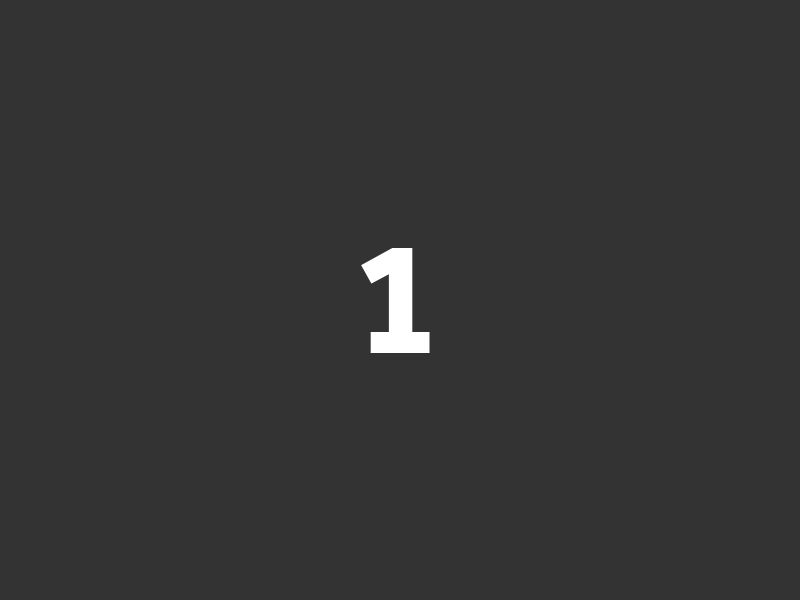
<style>
.page{position:relative;width:800px;height:600px;background:#333333}
.page>*{position:absolute;margin:0}
.t1{font:166.7px "Effra-Bold";color:#ffffff}
</style>
<div class="page">
<p class="t1" style="left:361px;top:248px;width:69px;height:105px">1</p>
</div>
